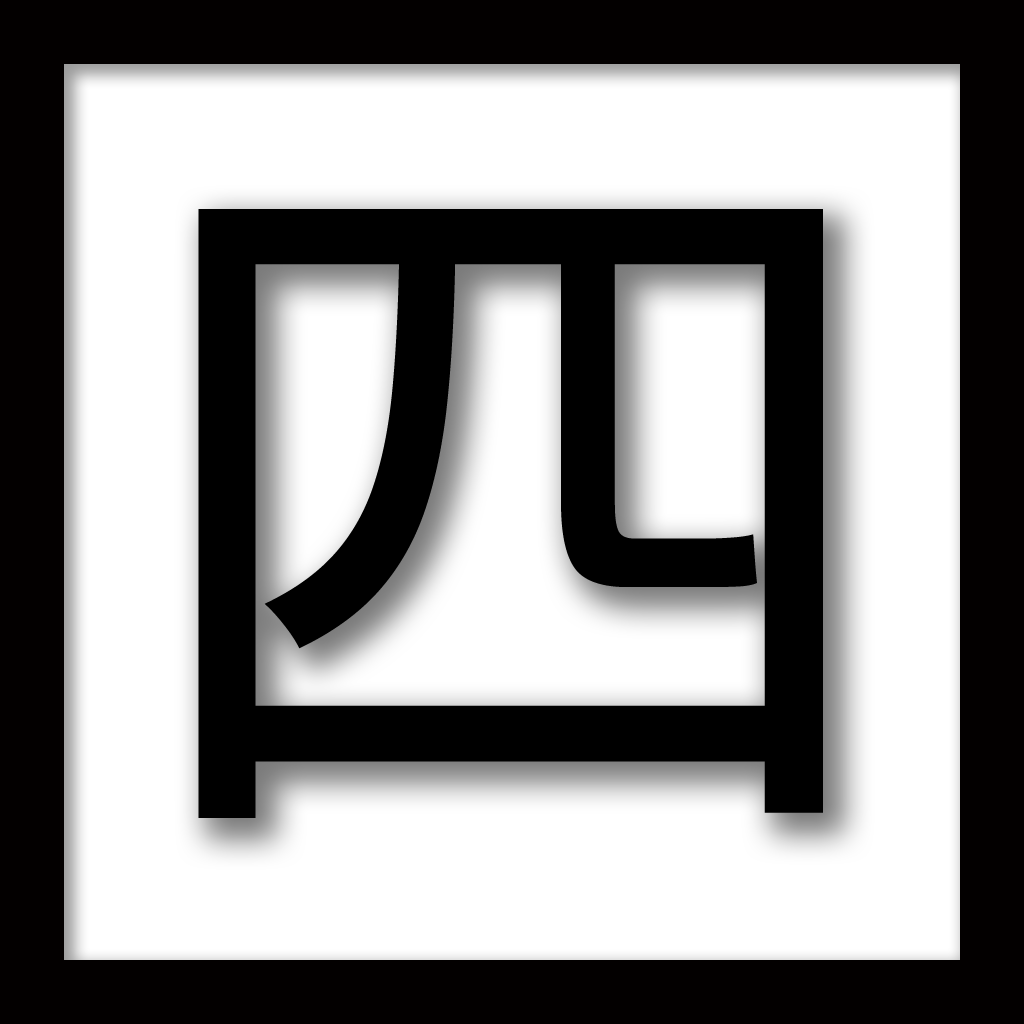
<style>
.page{position:relative;width:1024px;height:1024px;background:#ffffff}
.page>*{position:absolute;margin:0}
.t1{font:768px "SourceHanSansSC-Regular";color:#000000}
</style>
<div class="page">
<p class="t1" style="left:198px;top:209px;width:625px;height:609px">四</p>
</div>
